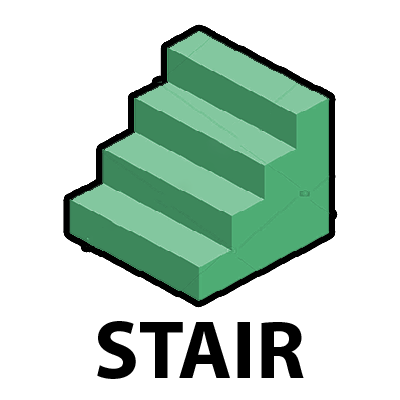
<style>
.page{position:relative;width:400px;height:400px;background:#ffffff}
.page>*{position:absolute;margin:0}
.t1{font:82.4px "MyriadPro-Bold";color:#000000}
</style>
<div class="page">
<p class="t1" style="left:97px;top:321px;width:207px;height:58px">STAIR</p>
</div>
